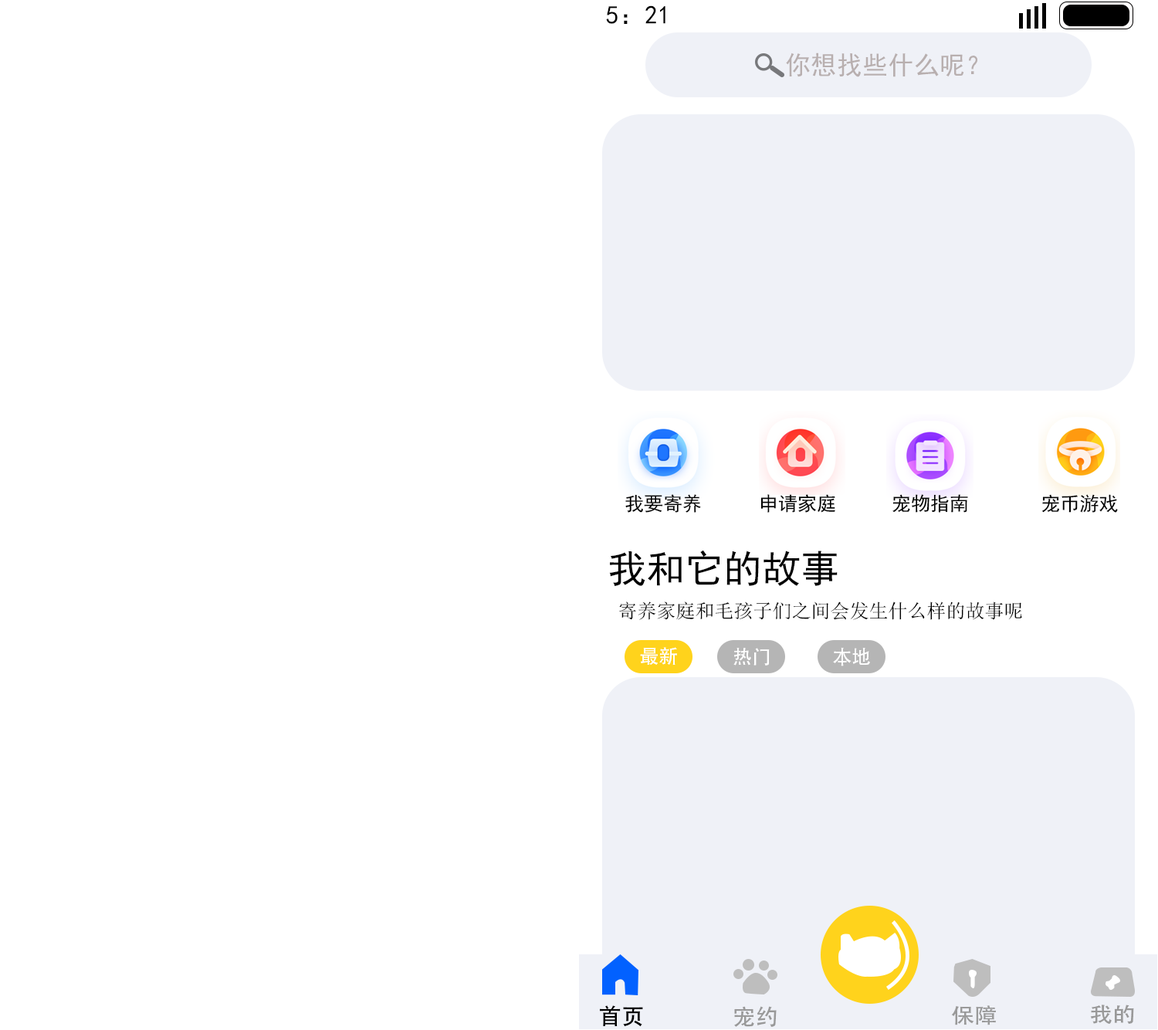
<style>
.page{position:relative;width:1158px;height:1030px;background:#ffffff}
.page>*{position:absolute;margin:0}
.t1{font:25.7px "SimHei";color:#000000}
.t2{font:25.7px "SimHei";color:#b8afaf}
.t3{font:19.3px "SimHei";color:#010101}
.t4{font:19.3px "SimHei";color:#000000}
.t5{font:38.6px "SimHei";color:#000000}
.t6{font:19.3px "SimSun";color:#000000}
.t7{font:19.3px "AdobeHeitiStd-Regular";color:#ffffff}
.t8{font:22.6px "AdobeHeitiStd-Regular";color:#000000}
.t9{font:22.6px "AdobeHeitiStd-Regular";color:#999999}
.t10{font:21px "AdobeHeitiStd-Regular";color:#999999;scale:1.1 1}
</style>
<div class="page">
<p class="t1" style="left:606px;top:5px;width:59px;height:19px">5：21</p>
<p class="t2" style="left:786px;top:52px;width:191px;height:25px">你想找些什么呢？</p>
<p class="t3" style="left:625px;top:494px;width:76px;height:19px">我要寄养</p>
<p class="t4" style="left:760px;top:494px;width:75px;height:19px">申请家庭</p>
<p class="t4" style="left:892px;top:494px;width:76px;height:19px">宠物指南</p>
<p class="t4" style="left:1041px;top:494px;width:77px;height:19px">宠币游戏</p>
<p class="t5" style="left:609px;top:550px;width:229px;height:36px">我和它的故事</p>
<p class="t6" style="left:619px;top:601px;width:403px;height:19px">寄养家庭和毛孩子们之间会发生什么样的故事呢</p>
<p class="t7" style="left:640px;top:647px;width:37px;height:18px">最新</p>
<p class="t7" style="left:733px;top:648px;width:37px;height:17px">热门</p>
<p class="t7" style="left:833px;top:647px;width:37px;height:19px">本地</p>
<p class="t8" style="left:600px;top:1005px;width:43px;height:22px">首页</p>
<p class="t9" style="left:734px;top:1006px;width:43px;height:21px">宠约</p>
<p class="t10" style="left:951px;top:1005px;width:45px;height:20px">保障</p>
<p class="t10" style="left:1090px;top:1004px;width:44px;height:20px">我的</p>
</div>
